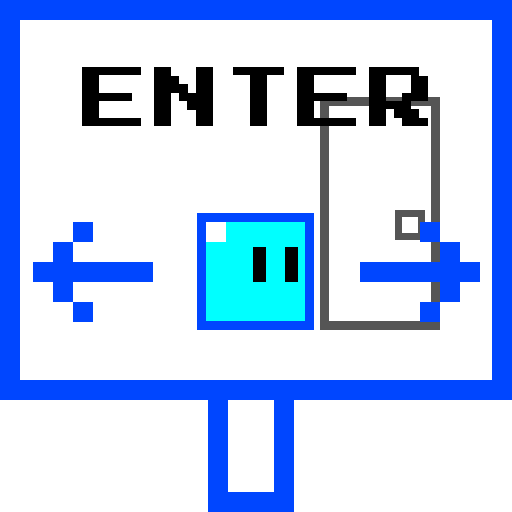
<style>
.page{position:relative;width:512px;height:512px;background:#ffffff}
.page>*{position:absolute;margin:0}
.t1{font:66.7px "PressStart2P-Regular";letter-spacing:0.075em;color:#000000}
</style>
<div class="page">
<p class="t1" style="left:82px;top:67px;width:346px;height:59px">ENTER</p>
</div>
